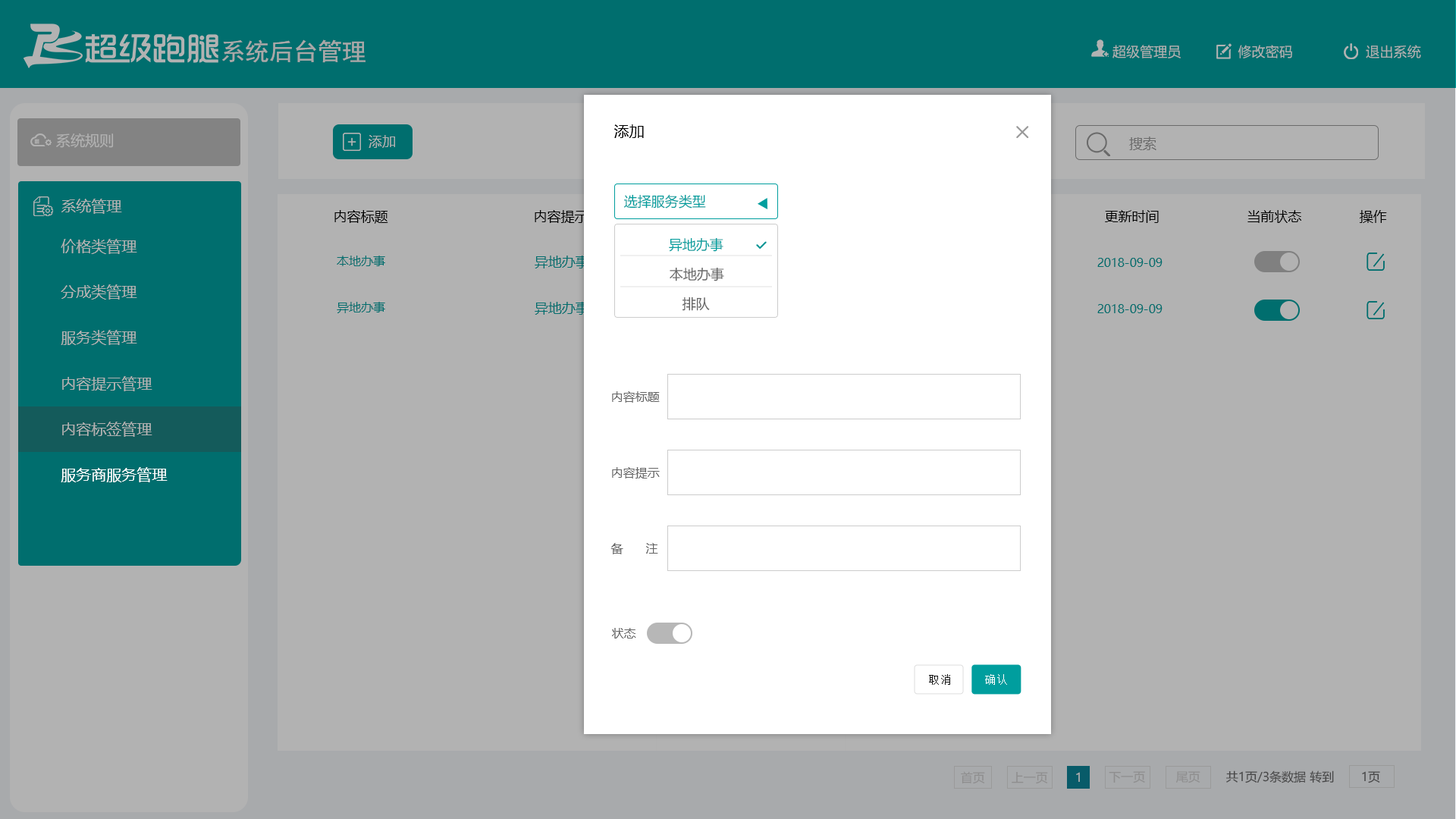
<style>
.page{position:relative;width:1456px;height:819px;background:#b2b2b2}
.page>*{position:absolute;margin:0}
.t1{font:24.4px "SimHei";color:#a8a8a8}
.t2{font:13.7px "MicrosoftYaHei";color:#b2b2b2}
.t3{font:15.2px "MicrosoftYaHei";color:#000000}
.t4{font:14.5px "MicrosoftYaHei";color:#b2b2b2}
.t5{font:13.6px "MicrosoftYaHei";color:#b2b2b2}
.t6{font:13.6px "MicrosoftYaHei";color:#6b6b6b}
.t7{font:13.6px "MicrosoftYaHei";color:#009e9e}
.t8{font:15.2px "MicrosoftYaHei";color:#b2b2b2}
.t9{font:13.6px "MicrosoftYaHei";color:#000000}
.t10{font:12.1px "MicrosoftYaHei";color:#006e6e}
.t11{font:13.6px "MicrosoftYaHei";color:#006e6e}
.t12{font:13.6px "MicrosoftYaHei";color:#666666}
.t13{font:12.1px "MicrosoftYaHei";color:#666666}
.t14{font:15.2px "MicrosoftYaHei";color:#ffffff}
.t15{font:11.5px "SimSun";letter-spacing:0.075em;color:#111111}
.t16{font:11.5px "SimSun";letter-spacing:0.075em;color:#ffffff}
.t17{font:12.1px "MicrosoftYaHei";color:#8e8e8e}
.t18{font:12.1px "MicrosoftYaHei";color:#b2b2b2}
.t19{font:12.1px "MicrosoftYaHei";color:#464646}
</style>
<div class="page">
<p class="t1" style="left:222px;top:39px;width:144px;height:24px">系统后台管理</p>
<p class="t2" style="left:1112px;top:45px;width:309px;height:13px">超级管理员              修改密码                  退出系统</p>
<p class="t3" style="left:614px;top:124px;width:30px;height:14px">添加</p>
<p class="t4" style="left:56px;top:133px;width:58px;height:15px">系统规则</p>
<p class="t5" style="left:369px;top:135px;width:26px;height:13px">添加</p>
<p class="t6" style="left:1129px;top:136px;width:27px;height:14px">搜索</p>
<p class="t7" style="left:624px;top:194px;width:82px;height:15px">选择服务类型</p>
<p class="t8" style="left:61px;top:199px;width:61px;height:15px">系统管理</p>
<p class="t9" style="left:334px;top:210px;width:54px;height:14px">内容标题</p>
<p class="t9" style="left:535px;top:210px;width:53px;height:13px">内容提示</p>
<p class="t9" style="left:1105px;top:210px;width:54px;height:13px">更新时间</p>
<p class="t9" style="left:1247px;top:210px;width:54px;height:13px">当前状态</p>
<p class="t9" style="left:1360px;top:210px;width:27px;height:13px">操作</p>
<p class="t8" style="left:61px;top:239px;width:76px;height:15px">价格类管理</p>
<p class="t7" style="left:669px;top:237px;width:54px;height:15px">异地办事</p>
<p class="t10" style="left:337px;top:256px;width:48px;height:10px">本地办事</p>
<p class="t11" style="left:535px;top:256px;width:54px;height:12px">异地办事</p>
<p class="t10" style="left:1097px;top:258px;width:66px;height:9px">2018-09-09</p>
<p class="t12" style="left:670px;top:267px;width:54px;height:14px">本地办事</p>
<p class="t8" style="left:61px;top:284px;width:76px;height:16px">分成类管理</p>
<p class="t10" style="left:337px;top:302px;width:48px;height:11px">异地办事</p>
<p class="t11" style="left:535px;top:302px;width:54px;height:13px">异地办事</p>
<p class="t12" style="left:682px;top:297px;width:28px;height:14px">排队</p>
<p class="t10" style="left:1097px;top:304px;width:66px;height:9px">2018-09-09</p>
<p class="t8" style="left:61px;top:330px;width:76px;height:15px">服务类管理</p>
<p class="t8" style="left:62px;top:376px;width:90px;height:15px">内容提示管理</p>
<p class="t13" style="left:612px;top:391px;width:48px;height:12px">内容标题</p>
<p class="t8" style="left:62px;top:422px;width:90px;height:15px">内容标签管理</p>
<p class="t14" style="left:61px;top:467px;width:107px;height:15px">服务商服务管理</p>
<p class="t13" style="left:612px;top:467px;width:48px;height:12px">内容提示</p>
<p class="t13" style="left:610px;top:543px;width:48px;height:11px">备      注</p>
<p class="t13" style="left:612px;top:628px;width:24px;height:11px">状态</p>
<p class="t15" style="left:929px;top:674px;width:21px;height:11px">取消</p>
<p class="t16" style="left:985px;top:674px;width:22px;height:11px">确认</p>
<p class="t17" style="left:961px;top:771px;width:24px;height:13px">首页</p>
<p class="t17" style="left:1012px;top:772px;width:36px;height:12px">上一页</p>
<p class="t18" style="left:1076px;top:772px;width:4px;height:10px">1</p>
<p class="t17" style="left:1109px;top:771px;width:36px;height:12px">下一页</p>
<p class="t17" style="left:1176px;top:771px;width:24px;height:12px">尾页</p>
<p class="t19" style="left:1226px;top:770px;width:108px;height:13px">共1页/3条数据 转到</p>
<p class="t19" style="left:1362px;top:771px;width:18px;height:12px">1页</p>
</div>
